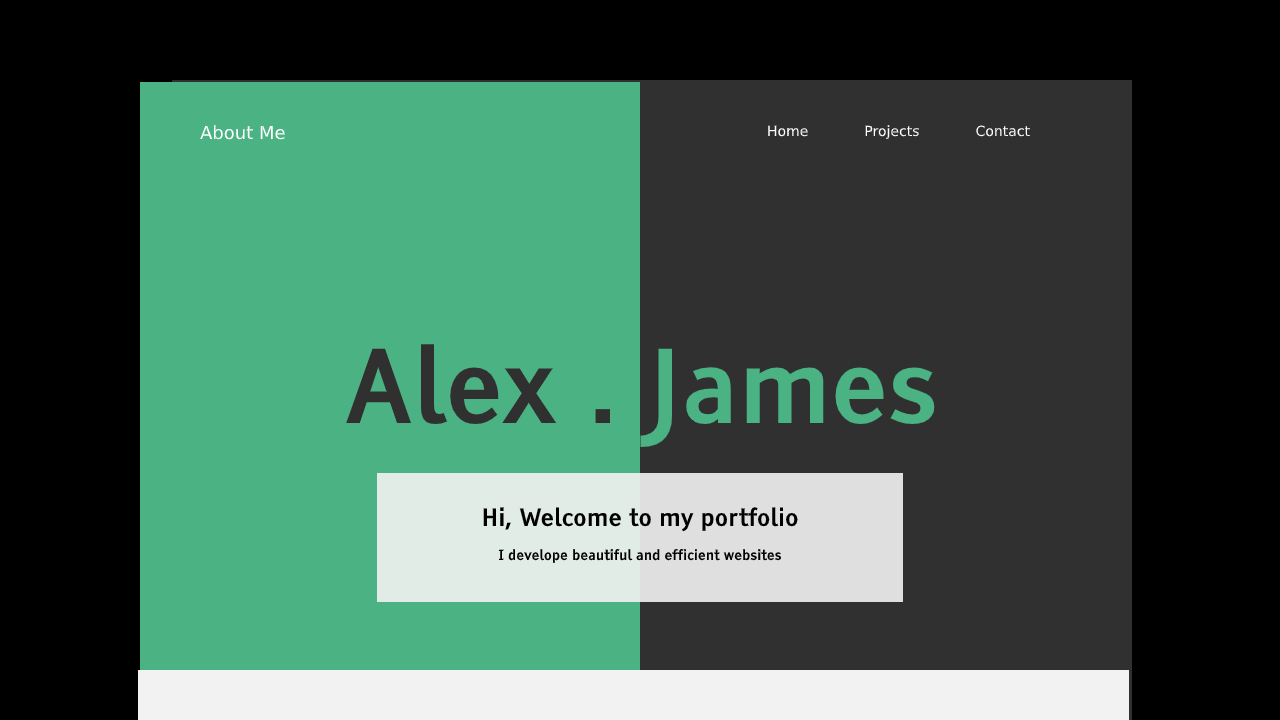
<style>
.page{position:relative;width:1280px;height:720px;background:#000000}
.page>*{position:absolute;margin:0}
.t1{font:18px "DejaVuSans";color:#ffffff}
.t2{font:14px "DejaVuSans";color:#ffffff}
.t3{font:14px "TiresiasInfofont";color:#000000}
.t4{font:24px "TiresiasInfofont";color:#000000}
</style>
<div class="page">
<p class="t1" style="left:200px;top:125px;width:85px;height:15px">About Me</p>
<p class="t2" style="left:768px;top:125px;width:262px;height:14px">Home  Projects  Contact</p>
<p class="t3" style="left:483px;top:507px;width:315px;height:56px;text-align:center"><span class="t4">Hi, Welcome to my portfolio<br><br></span>I develope beautiful and efficient websites</p>
</div>
